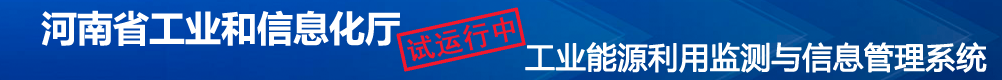
<style>
.page{position:relative;width:1002px;height:80px}
.page>*{position:absolute;margin:0}
.t1{font:36px "MicrosoftYaHei-Bold";color:#ffffff}
.t2{font:30px "MicrosoftYaHei";color:#ffffff;font-weight:bold}
</style>
<div class="page">
<p class="t1" style="left:41px;top:10px;width:359px;height:36px">河南省工业和信息化厅</p>
<p class="t2" style="left:525px;top:42px;width:462px;height:31px">工业能源利用监测与信息管理系统</p>
</div>
